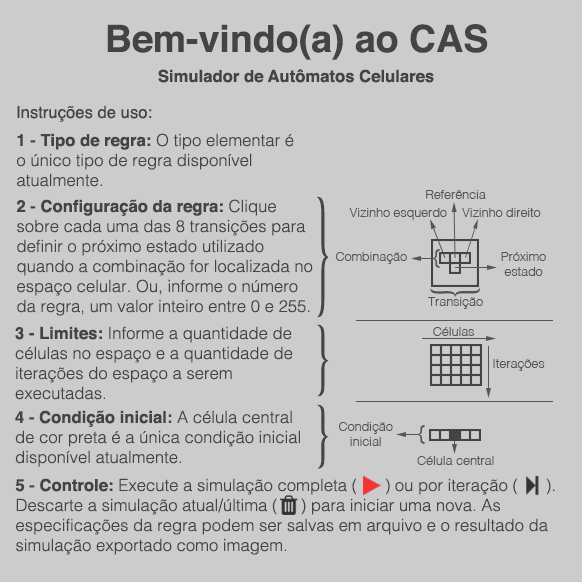
<style>
.page{position:relative;width:582px;height:582px;background:#cccccc}
.page>*{position:absolute;margin:0}
.t1{font:37.5px "Helvetica-Bold";color:#444444}
.t2{font:16.7px "Helvetica-Bold";color:#444444}
.t3{font:16.7px "Helvetica";color:#444444}
.t4{font:16.7px "Helvetica-Light";color:#444444}
.t5{font:129.1px "Helvetica-Light";color:#444444;scale:0.35 1}
.t6{font:12.5px "Helvetica-Light";color:#555555}
.t7{font:20.8px "Helvetica";color:#555555}
.t8{font:53.4px "Helvetica-Light";color:#555555;scale:0.79 1}
.t9{font:76.7px "Helvetica-Light";color:#444444;scale:0.6 1}
.t10{font:68.4px "Helvetica-Light";color:#444444;scale:0.67 1}
</style>
<div class="page">
<p class="t1" style="left:107px;top:24px;width:381px;height:36px">Bem-vindo(a) ao CAS</p>
<p class="t2" style="left:158px;top:69px;width:276px;height:14px">Simulador de Autômatos Celulares</p>
<p class="t3" style="left:17px;top:105px;width:135px;height:17px">Instruções de uso:</p>
<p class="t4" style="left:17px;top:133px;width:277px;height:54px"><span class="t2">1 - Tipo de regra: </span>O tipo elementar é o único tipo de regra disponível atualmente.</p>
<p class="t5" style="left:317px;top:196px;width:12px;height:121px">}</p>
<p class="t6" style="left:426px;top:190px;width:60px;height:9px">Referência</p>
<p class="t4" style="left:16px;top:199px;width:297px;height:117px"><span class="t2">2 - Configuração da regra: </span>Clique sobre cada uma das 8 transições para definir o próximo estado utilizado quando a combinação for localizada no espaço celular. Ou, informe o número da regra, um valor inteiro entre 0 e 255.</p>
<p class="t6" style="left:349px;top:208px;width:98px;height:12px">Vizinho esquerdo</p>
<p class="t6" style="left:462px;top:208px;width:79px;height:9px">Vizinho direito</p>
<p class="t6" style="left:336px;top:252px;width:71px;height:12px">Combinação</p>
<p class="t7" style="left:432px;top:249px;width:8px;height:19px">{</p>
<p class="t6" style="left:501px;top:252px;width:45px;height:24px;text-align:center">Próximo estado</p>
<p class="t8" style="left:430px;top:287px;width:50px;height:10px;rotate:-90deg">{</p>
<p class="t6" style="left:428px;top:297px;width:55px;height:12px">Transição</p>
<p class="t4" style="left:15px;top:326px;width:278px;height:74px"><span class="t2">3 - Limites: </span>Informe a quantidade de células no espaço e a quantidade de iterações do espaço a serem <br>executadas.</p>
<p class="t9" style="left:317px;top:324px;width:12px;height:73px">}</p>
<p class="t6" style="left:433px;top:327px;width:41px;height:9px">Células</p>
<p class="t6" style="left:493px;top:359px;width:52px;height:12px">Iterações</p>
<p class="t4" style="left:15px;top:410px;width:285px;height:57px"><span class="t2">4 - Condição inicial: </span>A célula central de cor preta é a única condição inicial disponível atualmente.</p>
<p class="t10" style="left:317px;top:404px;width:12px;height:65px">}</p>
<p class="t6" style="left:339px;top:422px;width:54px;height:24px;text-align:center">Condição inicial</p>
<p class="t7" style="left:417px;top:425px;width:8px;height:19px">{</p>
<p class="t6" style="left:417px;top:456px;width:77px;height:9px">Célula central</p>
<p class="t4" style="left:15px;top:478px;width:540px;height:77px"><span class="t2">5 - Controle: </span>Execute a simulação completa (      ) ou por iteração (      ). Descarte a simulação atual/última (     ) para iniciar uma nova. As <br>especificações da regra podem ser salvas em arquivo e o resultado da simulação exportado como imagem.</p>
</div>
